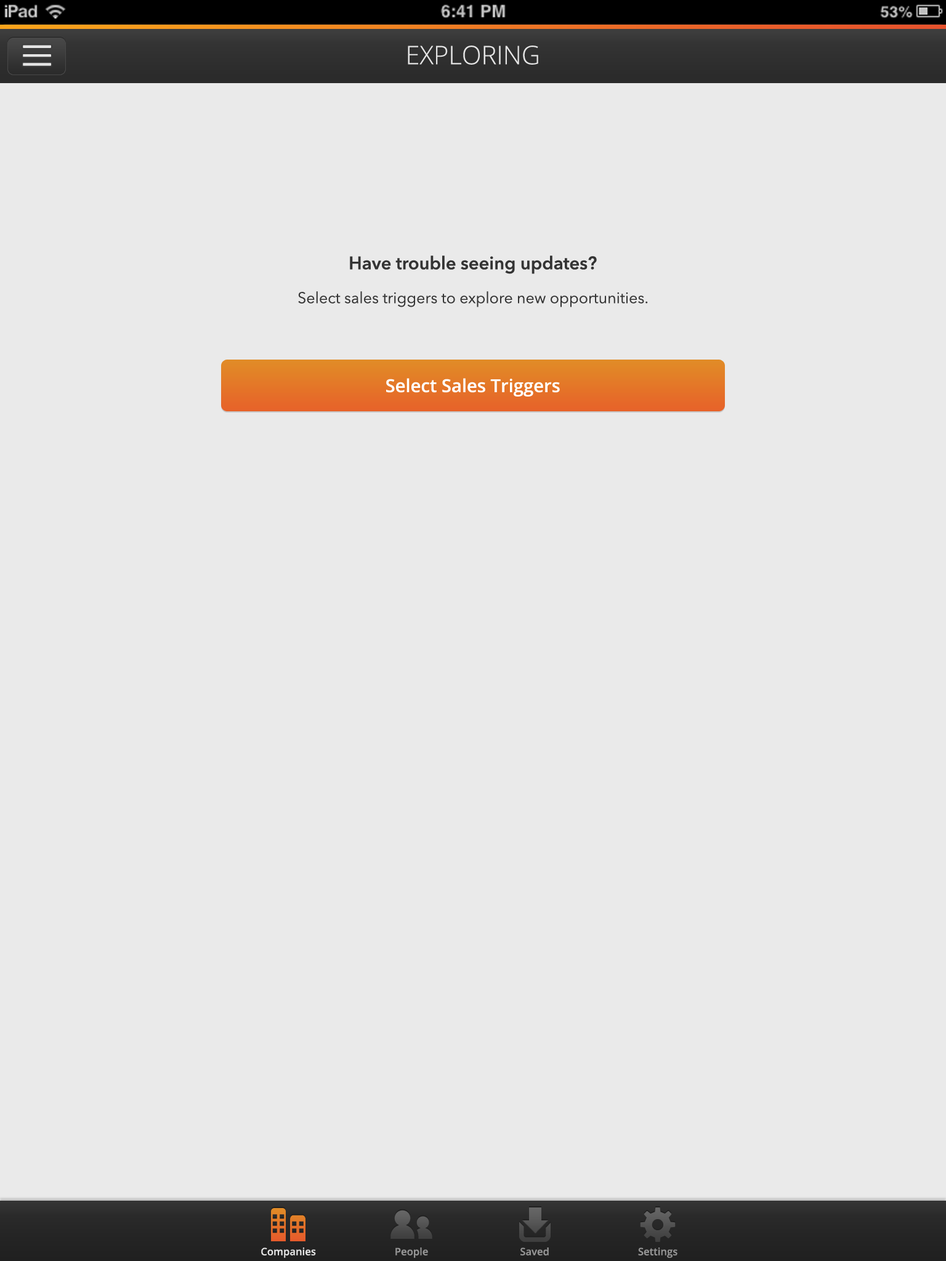
<style>
.page{position:relative;width:946px;height:1261px;background:#eaeaea}
.page>*{position:absolute;margin:0}
.t1{font:25.7px "OpenSans-Light";color:#e5e5e5}
.t2{font:15.4px "AvenirNext-Regular";color:#343434}
.t3{font:18px "AvenirNext-DemiBold";color:#343434}
.t4{font:18px "OpenSans-Semibold";color:#ffffff}
.t5{font:10.3px "OpenSans-Semibold";color:#e5e5e5}
.t6{font:10.3px "OpenSans-Semibold";color:#969696}
</style>
<div class="page">
<p class="t1" style="left:408px;top:46px;width:130px;height:19px">EXPLORING</p>
<p class="t2" style="left:298px;top:256px;width:350px;height:51px;text-align:center"><span class="t3">Have trouble seeing updates?<br><br></span>Select sales triggers to explore new opportunities.</p>
<p class="t4" style="left:386px;top:378px;width:174px;height:18px">Select Sales Triggers</p>
<p class="t5" style="left:261px;top:1247px;width:55px;height:11px">Companies</p>
<p class="t6" style="left:395px;top:1247px;width:33px;height:11px">People</p>
<p class="t6" style="left:520px;top:1247px;width:29px;height:8px">Saved</p>
<p class="t6" style="left:638px;top:1247px;width:39px;height:11px">Settings</p>
</div>
